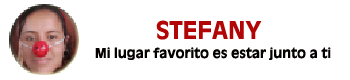
<style>
.page{position:relative;width:350px;height:80px;background:#ffffff}
.page>*{position:absolute;margin:0}
.t1{font:24px "AntiqueOlive-Bold";color:#b20606}
.t2{font:13.3px "AntiqueOlive-Bold";color:#040000}
</style>
<div class="page">
<p class="t1" style="left:156px;top:20px;width:106px;height:20px">STEFANY</p>
<p class="t2" style="left:95px;top:47px;width:236px;height:13px">Mi lugar favorito es estar junto a ti</p>
</div>
